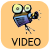
<style>
.page{position:relative;width:50px;height:50px;background:#ffcb80}
.page>*{position:absolute;margin:0}
.t1{font:11px "TrebuchetMS";color:#080808}
</style>
<div class="page">
<p class="t1" style="left:11px;top:38px;width:30px;height:8px">VIDEO</p>
</div>
